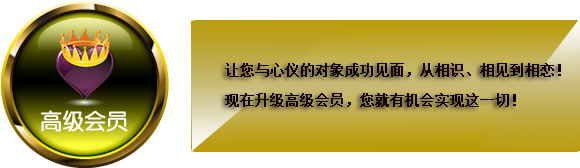
<style>
.page{position:relative;width:580px;height:168px;background:#ffffff}
.page>*{position:absolute;margin:0}
.t1{font:14px/30px "SimSun";color:#0d0101;font-weight:bold}
</style>
<div class="page">
<p class="t1" style="left:225px;top:63px;width:336px;height:44px">让您与心仪的对象成功见面，从相识、相见到相恋！<br>   现在升级高级会员，您就有机会实现这一切！</p>
</div>
